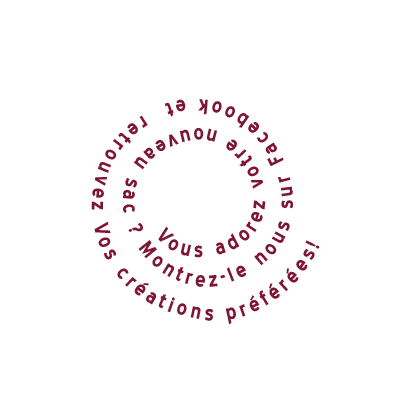
<style>
.page{position:relative;width:400px;height:400px;background:#ffffff}
.page>*{position:absolute;margin:0}
.t1{font:20px/10px "BlueHighway-Bold";letter-spacing:0.2em;color:#7e1532}
</style>
<div class="page">
<p class="t1" style="left:91px;top:99px;width:229px;height:226px">Vous adorez votre nouveau sac ? Montrez-le nous sur Facebook et  retrouvez Vos créations préférées!</p>
</div>
